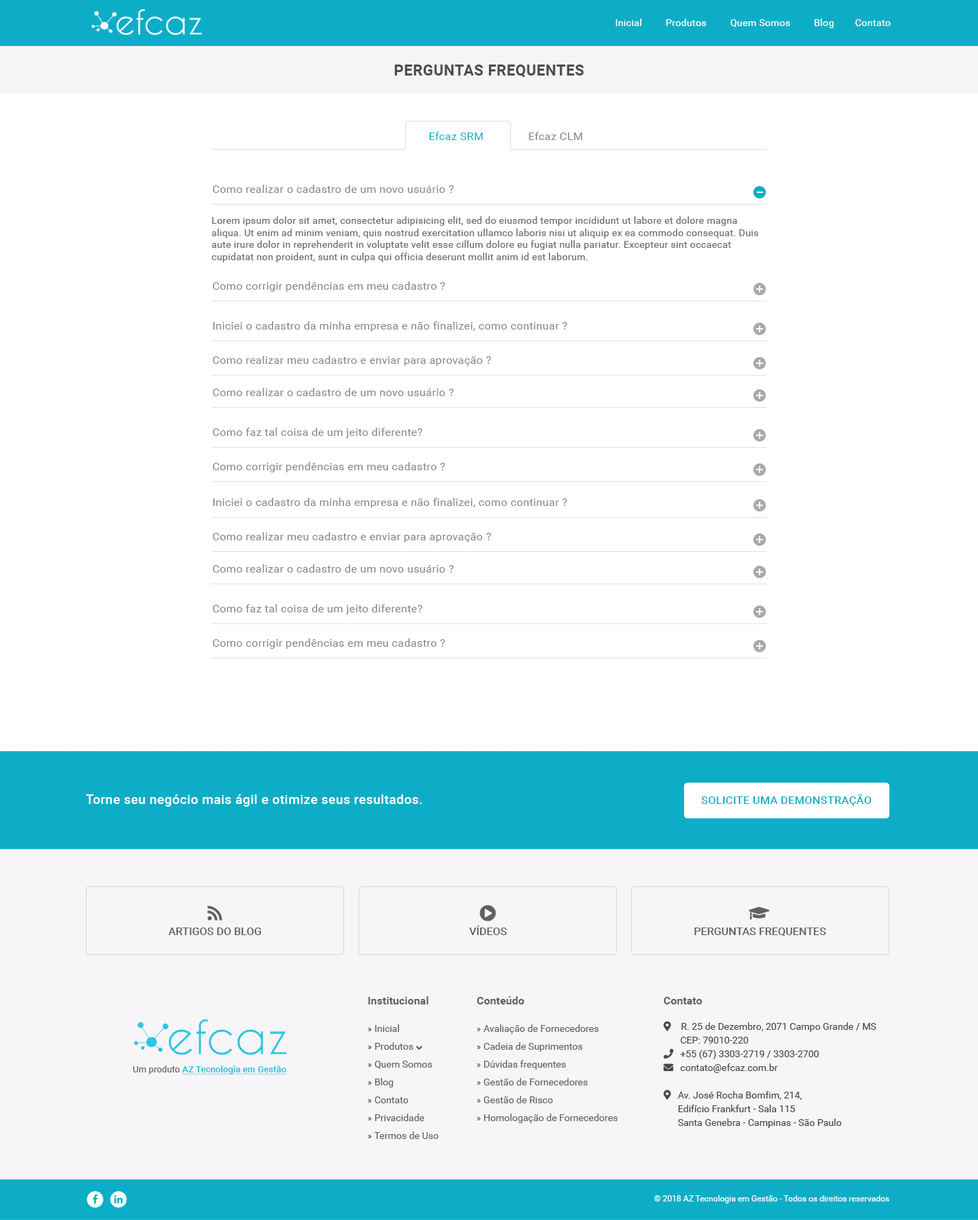
<style>
.page{position:relative;width:978px;height:1220px;background:#ffffff}
.page>*{position:absolute;margin:0}
.t1{font:9.6px "Roboto-Regular";letter-spacing:0.025em;color:#ffffff}
.t2{font:15.1px "Roboto-Bold";letter-spacing:0.025em;color:#4c4c4c}
.t3{font:11px "Roboto-Regular";letter-spacing:0.025em;color:#0eadc7}
.t4{font:11px "Roboto-Regular";letter-spacing:0.025em;color:#848484}
.t5{font:13px "Roboto-Medium";letter-spacing:0.025em;color:#ffffff}
.t6{font:11px "Roboto-Medium";letter-spacing:0.025em;color:#0eadc7}
.t7{font:11px "Roboto-Medium";color:#616161}
.t8{font:9.6px/17.8px "Roboto-Regular";color:#616161}
.t9{font:11px/16.5px "Roboto-Bold";color:#616161}
.t10{font:9.6px/27.5px "Roboto-Regular";color:#616161}
.t11{font:11px "Roboto-Bold";color:#616161}
.t12{font:9px "Roboto-Bold";color:#3dbfda;text-decoration:underline}
.t13{font:9px "Roboto-Regular";color:#616161}
.t14{font:8.2px "Roboto-Regular";color:#ffffff}
</style>
<div class="page">
<p class="t1" style="left:615px;top:19px;width:275px;height:9px">Inicial         Produtos         Quem Somos         Blog        Contato</p>
<p class="t2" style="left:394px;top:65px;width:189px;height:13px">PERGUNTAS FREQUENTES</p>
<p class="t3" style="left:429px;top:132px;width:54px;height:8px">Efcaz SRM</p>
<p class="t4" style="left:529px;top:132px;width:53px;height:8px">Efcaz CLM</p>
<p class="t4" style="left:213px;top:185px;width:241px;height:8px">Como realizar o cadastro de um novo usuário ?</p>
<p class="t4" style="left:213px;top:281px;width:232px;height:11px">Como corrigir pendências em meu cadastro ?</p>
<p class="t4" style="left:213px;top:321px;width:354px;height:11px">Iniciei o cadastro da minha empresa e não finalizei, como continuar ?</p>
<p class="t4" style="left:213px;top:356px;width:278px;height:10px">Como realizar meu cadastro e enviar para aprovação ?</p>
<p class="t4" style="left:213px;top:388px;width:241px;height:8px">Como realizar o cadastro de um novo usuário ?</p>
<p class="t4" style="left:213px;top:428px;width:209px;height:10px">Como faz tal coisa de um jeito diferente?</p>
<p class="t4" style="left:213px;top:462px;width:232px;height:10px">Como corrigir pendências em meu cadastro ?</p>
<p class="t4" style="left:213px;top:498px;width:354px;height:10px">Iniciei o cadastro da minha empresa e não finalizei, como continuar ?</p>
<p class="t4" style="left:213px;top:532px;width:278px;height:10px">Como realizar meu cadastro e enviar para aprovação ?</p>
<p class="t4" style="left:213px;top:564px;width:241px;height:9px">Como realizar o cadastro de um novo usuário ?</p>
<p class="t4" style="left:213px;top:604px;width:209px;height:10px">Como faz tal coisa de um jeito diferente?</p>
<p class="t4" style="left:213px;top:638px;width:232px;height:11px">Como corrigir pendências em meu cadastro ?</p>
<p class="t5" style="left:86px;top:794px;width:335px;height:13px">Torne seu negócio mais ágil e otimize seus resultados.</p>
<p class="t6" style="left:701px;top:794px;width:170px;height:12px">SOLICITE UMA DEMONSTRAÇÃO</p>
<p class="t7" style="left:168px;top:927px;width:93px;height:8px">ARTIGOS DO BLOG</p>
<p class="t7" style="left:469px;top:925px;width:38px;height:10px">VÍDEOS</p>
<p class="t7" style="left:694px;top:927px;width:132px;height:9px">PERGUNTAS FREQUENTES</p>
<p class="t8" style="left:476px;top:996px;width:141px;height:127px"><span class="t9">Conteúdo<br></span><span class="t10">» Avaliação de Fornecedores<br></span>» Cadeia de Suprimentos<br>» Dúvidas frequentes<br>» Gestão de Fornecedores<br>» Gestão de Risco<br>» Homologação de Fornecedores</p>
<p class="t11" style="left:663px;top:997px;width:39px;height:7px">Contato</p>
<p class="t12" style="left:133px;top:1065px;width:153px;height:9px"><span class="t13">Um produto </span>AZ Tecnologia em Gestão</p>
<p class="t14" style="left:654px;top:1195px;width:235px;height:8px">© 2018 AZ Tecnologia em Gestão - Todos os direitos reservados</p>
</div>
